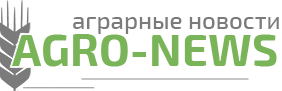
<style>
.page{position:relative;width:282px;height:91px;background:#ffffff}
.page>*{position:absolute;margin:0}
.t1{font:24px "Exo2-Medium";color:#7b7b7b}
.t2{font:45.3px "Exo2-Bold";color:#79b458}
</style>
<div class="page">
<p class="t1" style="left:73px;top:17px;width:206px;height:17px">аграрные новости</p>
<p class="t2" style="left:12px;top:34px;width:265px;height:33px">AGRO-NEWS</p>
</div>
